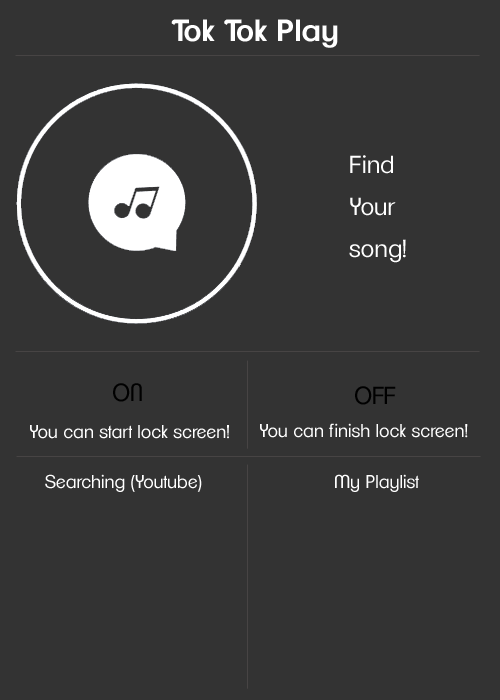
<style>
.page{position:relative;width:500px;height:700px;background:#333333}
.page>*{position:absolute;margin:0}
.t1{font:30px "ClementePDak-SemiBold";color:#ffffff}
.t2{font:24px "ClementePDag-Book";color:#ffffff}
.t3{font:24px "ClementePDag-Book";color:#000000}
.t4{font:18px "ClementePDag-Book";color:#ffffff}
</style>
<div class="page">
<p class="t1" style="left:171px;top:19px;width:167px;height:29px">Tok Tok Play</p>
<p class="t2" style="left:349px;top:155px;width:57px;height:108px">Find<br>Your<br>song!</p>
<p class="t3" style="left:113px;top:383px;width:29px;height:19px">ON</p>
<p class="t3" style="left:355px;top:386px;width:41px;height:19px">OFF</p>
<p class="t4" style="left:30px;top:425px;width:199px;height:14px">You can start lock screen!</p>
<p class="t4" style="left:260px;top:423px;width:208px;height:15px">You can finish lock screen!</p>
<p class="t4" style="left:45px;top:474px;width:157px;height:18px">Searching (Youtube)</p>
<p class="t4" style="left:335px;top:474px;width:84px;height:18px">My Playlist</p>
</div>
